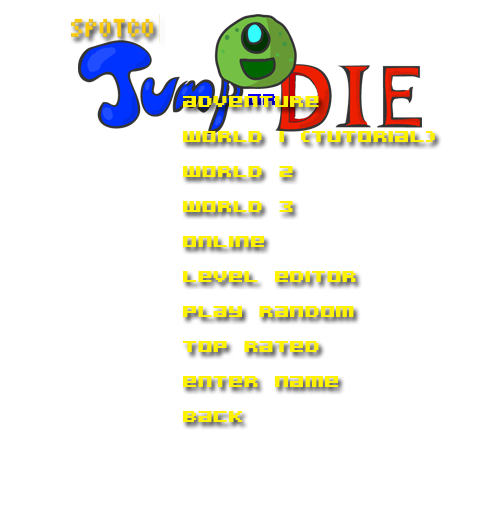
<style>
.page{position:relative;width:500px;height:520px;background:#ffffff}
.page>*{position:absolute;margin:0}
.t1{font:29.2px "AcknowledgeTT-BRK-";color:#fff200}
</style>
<div class="page">
<p class="t1" style="left:183px;top:96px;width:252px;height:326px">adventure<br>world 1 (tutorial)<br>world 2<br>world 3<br>online<br>level editor<br>play random<br>top rated<br>enter name<br>back</p>
</div>
